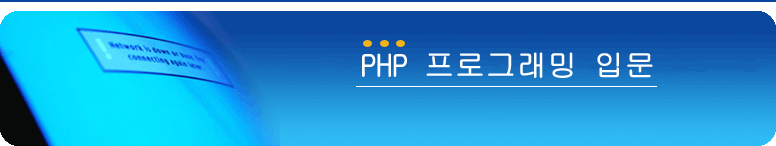
<style>
.page{position:relative;width:776px;height:146px}
.page>*{position:absolute;margin:0}
.t1{font:30px "GulimChe";color:#ffffff;font-weight:bold}
</style>
<div class="page">
<p class="t1" style="left:362px;top:52px;width:291px;height:26px">PHP 프로그래밍 입문</p>
</div>
